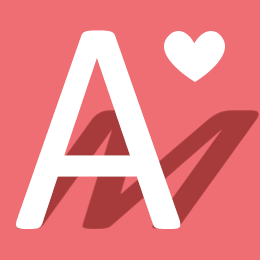
<style>
.page{position:relative;width:260px;height:260px;background:#ee6e73}
.page>*{position:absolute;margin:0}
.t1{font:310.9px "Calibri";color:#ffffff;scale:0.97 1}
</style>
<div class="page">
<p class="t1" style="left:16px;top:30px;width:165px;height:199px">A</p>
</div>
